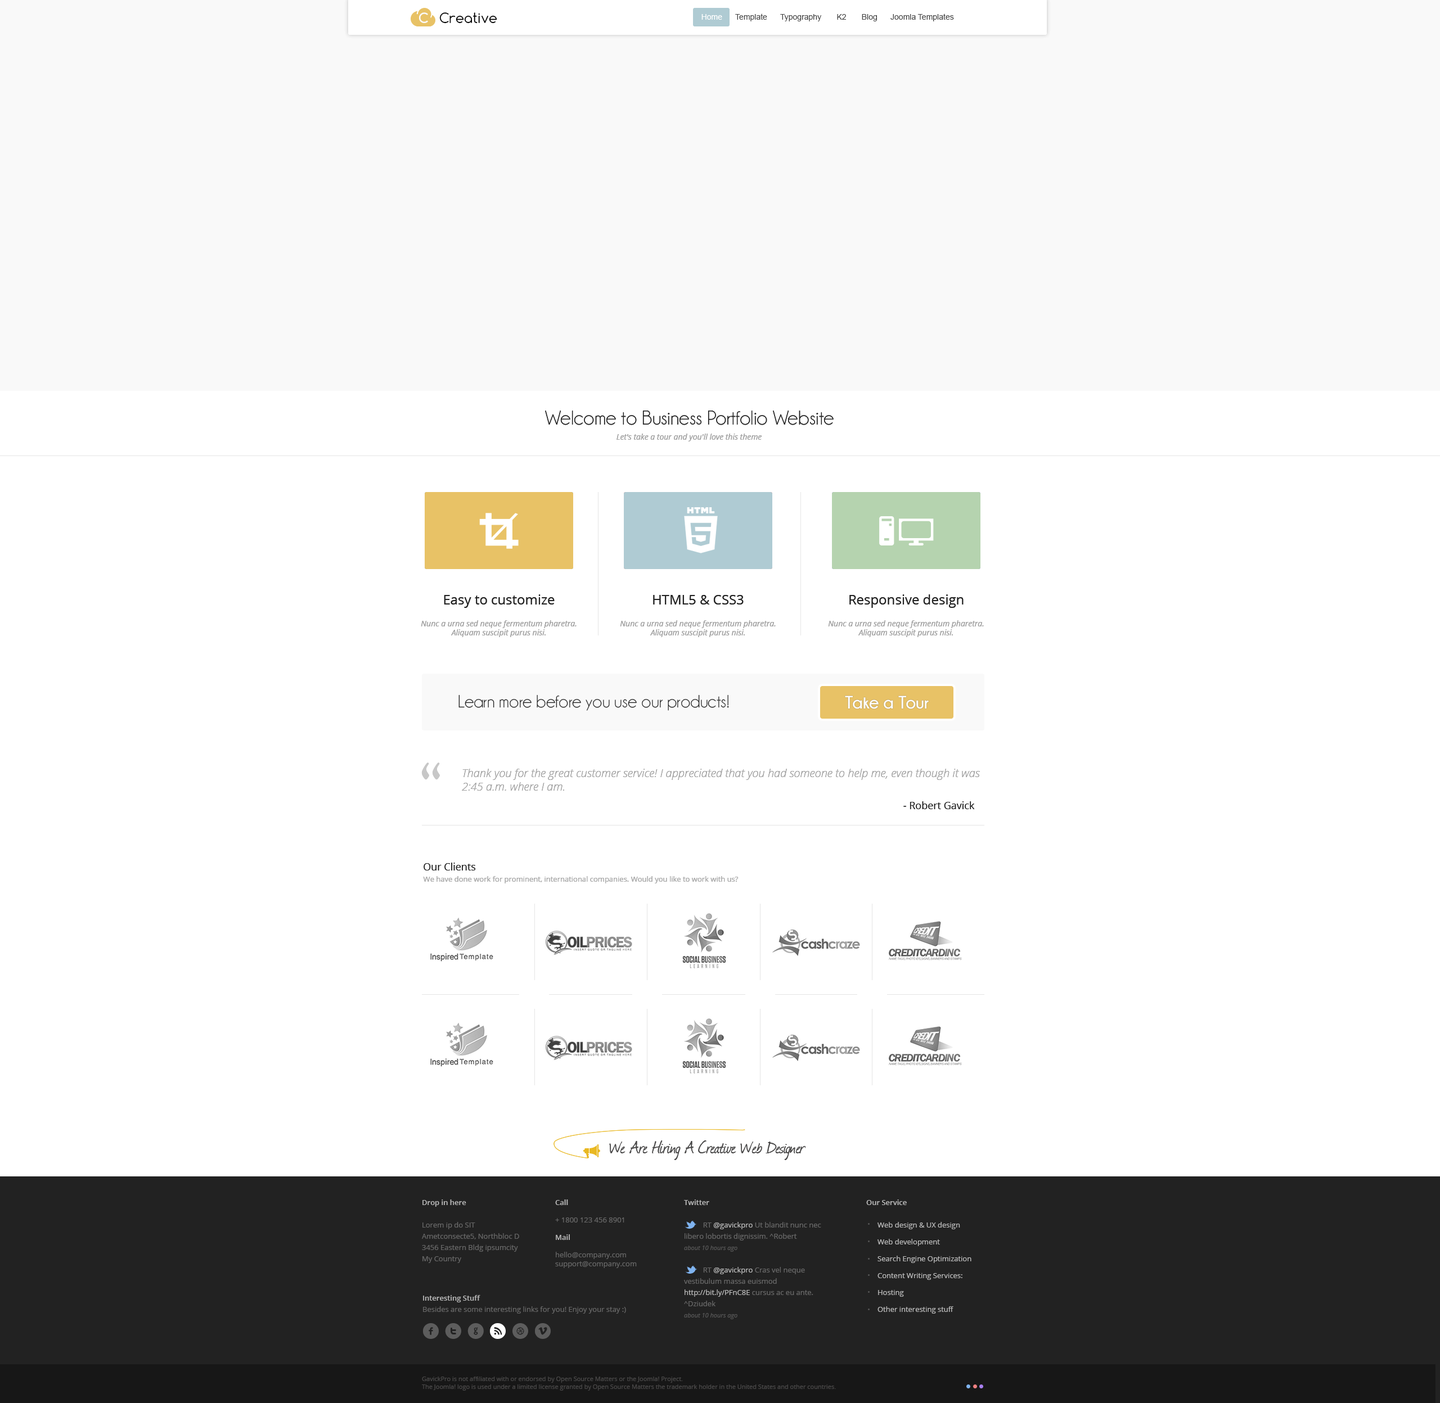
<style>
.page{position:relative;width:1440px;height:1403px;background:#ffffff}
.page>*{position:absolute;margin:0}
.t1{font:13.5px "Comfortaa-Regular";color:#010101}
.t2{font:13.5px "Comfortaa-Bold";color:#fbfbfb}
.t3{font:7.9px "ArialMT";color:#444444}
.t4{font:7.9px "ArialMT";color:#ffffff}
.t5{font:20.2px "Champagne&Limousines";color:#222222}
.t6{font:7.9px "OpenSans-Italic";color:#a5a5a5}
.t7{font:13.5px "OpenSans";color:#222222}
.t8{font:18px "Champagne&Limousines";color:#222222}
.t9{font:18px "Champagne&Limousines-Bold";color:#ffffff}
.t10{font:67.5px "Prociono-Regular";color:#c7c7c7}
.t11{font:11.2px "OpenSansLight-Italic";color:#a5a5a5}
.t12{font:10.1px "OpenSans";color:#222222}
.t13{font:7.3px "OpenSans";color:#aeaeae}
.t14{font:20.2px "Journal";color:#4a4949}
.t15{font:7.3px/11.2px "OpenSans";color:#676767}
.t16{font:7.3px/11.2px "OpenSans-Semibold";color:#b8b8b8}
.t17{font:7.3px "OpenSans";color:#676767}
.t18{font:7.3px "OpenSans-Semibold";color:#b8b8b8}
.t19{font:7.3px/11.2px "OpenSans";color:#b8b8b8}
.t20{font:6.2px/11.2px "OpenSans-Italic";color:#565656}
.t21{font:7.3px/16.9px "OpenSans";color:#b8b8b8}
.t22{font:22.5px "Socialico";letter-spacing:0.2em;color:#5d5d5d}
.t23{font:22.5px "Socialico";letter-spacing:0.2em;color:#ffffff}
.t24{font:6.2px/7.9px "OpenSans";color:#4a4949}
</style>
<div class="page">
<p class="t1" style="left:419px;top:12px;width:78px;height:12px"><span class="t2">C   </span>Creative</p>
<p class="t1" style="left:419px;top:12px;width:78px;height:12px"><span class="t2">C   </span>Creative</p>
<p class="t3" style="left:701px;top:14px;width:253px;height:7px"><span class="t4">Home </span>     Template      Typography       K2       Blog      Joomla Templates</p>
<p class="t3" style="left:701px;top:14px;width:253px;height:7px"><span class="t4">Home </span>     Template      Typography       K2       Blog      Joomla Templates</p>
<p class="t5" style="left:545px;top:411px;width:289px;height:14px">Welcome to Business Portfolio Website</p>
<p class="t5" style="left:545px;top:411px;width:289px;height:14px">Welcome to Business Portfolio Website</p>
<p class="t6" style="left:616px;top:434px;width:146px;height:8px">Let's take a tour and you'll love this theme</p>
<p class="t6" style="left:616px;top:434px;width:146px;height:8px">Let's take a tour and you'll love this theme</p>
<p class="t7" style="left:444px;top:595px;width:111px;height:13px">Easy to customize</p>
<p class="t7" style="left:444px;top:595px;width:111px;height:13px">Easy to customize</p>
<p class="t7" style="left:653px;top:595px;width:91px;height:10px">HTML5 &amp; CSS3</p>
<p class="t7" style="left:653px;top:595px;width:91px;height:10px">HTML5 &amp; CSS3</p>
<p class="t7" style="left:849px;top:595px;width:115px;height:13px">Responsive design</p>
<p class="t7" style="left:849px;top:595px;width:115px;height:13px">Responsive design</p>
<p class="t6" style="left:421px;top:620px;width:156px;height:17px;text-align:center">Nunc a urna sed neque fermentum pharetra. Aliquam suscipit purus nisi.</p>
<p class="t6" style="left:421px;top:620px;width:156px;height:17px;text-align:center">Nunc a urna sed neque fermentum pharetra. Aliquam suscipit purus nisi.</p>
<p class="t6" style="left:620px;top:620px;width:156px;height:17px;text-align:center">Nunc a urna sed neque fermentum pharetra. Aliquam suscipit purus nisi.</p>
<p class="t6" style="left:620px;top:620px;width:156px;height:17px;text-align:center">Nunc a urna sed neque fermentum pharetra. Aliquam suscipit purus nisi.</p>
<p class="t6" style="left:828px;top:620px;width:156px;height:17px;text-align:center">Nunc a urna sed neque fermentum pharetra. Aliquam suscipit purus nisi.</p>
<p class="t6" style="left:828px;top:620px;width:156px;height:17px;text-align:center">Nunc a urna sed neque fermentum pharetra. Aliquam suscipit purus nisi.</p>
<p class="t8" style="left:458px;top:695px;width:271px;height:16px">Learn more before you use our products!</p>
<p class="t8" style="left:458px;top:695px;width:271px;height:16px">Learn more before you use our products!</p>
<p class="t9" style="left:845px;top:696px;width:84px;height:13px">Take a Tour</p>
<p class="t9" style="left:845px;top:696px;width:84px;height:13px">Take a Tour</p>
<p class="t10" style="left:421px;top:763px;width:19px;height:17px">“</p>
<p class="t10" style="left:421px;top:763px;width:19px;height:17px">“</p>
<p class="t11" style="left:462px;top:769px;width:518px;height:22px">Thank you for the great customer service! I appreciated that you had someone to help me, even though it was 2:45 a.m. where I am.</p>
<p class="t11" style="left:462px;top:769px;width:518px;height:22px">Thank you for the great customer service! I appreciated that you had someone to help me, even though it was 2:45 a.m. where I am.</p>
<p class="t12" style="left:903px;top:802px;width:72px;height:7px">- Robert Gavick</p>
<p class="t12" style="left:903px;top:802px;width:72px;height:7px">- Robert Gavick</p>
<p class="t12" style="left:424px;top:863px;width:52px;height:8px">Our Clients</p>
<p class="t12" style="left:424px;top:863px;width:52px;height:8px">Our Clients</p>
<p class="t13" style="left:423px;top:876px;width:316px;height:8px">We have done work for prominent, international companies. Would you like to work with us?</p>
<p class="t13" style="left:423px;top:876px;width:316px;height:8px">We have done work for prominent, international companies. Would you like to work with us?</p>
<p class="t14" style="left:609px;top:1141px;width:197px;height:19px">We Are Hiring A Creative Web Designer</p>
<p class="t14" style="left:609px;top:1141px;width:197px;height:19px">We Are Hiring A Creative Web Designer</p>
<p class="t15" style="left:422px;top:1200px;width:97px;height:63px"><span class="t16">Drop in here<br></span><br>Lorem ip do SIT<br>Ametconsecte5, Northbloc D<br>3456 Eastern Bldg ipsumcity<br>My Country</p>
<p class="t15" style="left:422px;top:1200px;width:97px;height:63px"><span class="t16">Drop in here<br></span><br>Lorem ip do SIT<br>Ametconsecte5, Northbloc D<br>3456 Eastern Bldg ipsumcity<br>My Country</p>
<p class="t17" style="left:555px;top:1200px;width:82px;height:68px"><span class="t18">Call<br></span><br>+ 1800 123 456 8901<br><br><span class="t18">Mail<br></span><br>hello@company.com<br>support@company.com</p>
<p class="t17" style="left:555px;top:1200px;width:82px;height:68px"><span class="t18">Call<br></span><br>+ 1800 123 456 8901<br><br><span class="t18">Mail<br></span><br>hello@company.com<br>support@company.com</p>
<p class="t15" style="left:684px;top:1200px;width:137px;height:120px"><span class="t16">Twitter<br></span><br>          RT <span class="t19">@gavickpro</span> Ut blandit nunc nec libero lobortis dignissim. ^Robert<br><span class="t20">about 10 hours ago<br><br></span>          RT <span class="t19">@gavickpro</span> Cras vel neque vestibulum massa euismod <span class="t19">http://bit.ly/PFnC8E</span> cursus ac eu ante. ^Dziudek<br><span class="t20">about 10 hours ago</span></p>
<p class="t15" style="left:684px;top:1200px;width:137px;height:120px"><span class="t16">Twitter<br></span><br>          RT <span class="t19">@gavickpro</span> Ut blandit nunc nec libero lobortis dignissim. ^Robert<br><span class="t20">about 10 hours ago<br><br></span>          RT <span class="t19">@gavickpro</span> Cras vel neque vestibulum massa euismod <span class="t19">http://bit.ly/PFnC8E</span> cursus ac eu ante. ^Dziudek<br><span class="t20">about 10 hours ago</span></p>
<p class="t18" style="left:866px;top:1200px;width:41px;height:5px"><span class="t17"><br></span>Our Service<br><span class="t17"></span></p>
<p class="t18" style="left:866px;top:1200px;width:41px;height:5px"><span class="t17"><br></span>Our Service<br><span class="t17"></span></p>
<p class="t21" style="left:878px;top:1222px;width:93px;height:92px">Web design &amp; UX design<br>Web development<br>Search Engine Optimization<br>Content Writing Services:<br>Hosting<br>Other interesting stuff</p>
<p class="t21" style="left:878px;top:1222px;width:93px;height:92px">Web design &amp; UX design<br>Web development<br>Search Engine Optimization<br>Content Writing Services:<br>Hosting<br>Other interesting stuff</p>
<p class="t15" style="left:423px;top:1295px;width:203px;height:19px"><span class="t16">Interesting Stuff<br></span>Besides are some interesting links for you! Enjoy your stay :)</p>
<p class="t15" style="left:423px;top:1295px;width:203px;height:19px"><span class="t16">Interesting Stuff<br></span>Besides are some interesting links for you! Enjoy your stay :)</p>
<p class="t22" style="left:423px;top:1324px;width:128px;height:15px">ftg<span class="t23">r</span>dv</p>
<p class="t22" style="left:423px;top:1324px;width:128px;height:15px">ftg<span class="t23">r</span>dv</p>
<p class="t24" style="left:422px;top:1377px;width:414px;height:14px">GavickPro is not affiliated with or endorsed by Open Source Matters or the Joomla! Project.<br>The Joomla! logo is used under a limited license granted by Open Source Matters the trademark holder in the United States and other countries.</p>
<p class="t24" style="left:422px;top:1377px;width:414px;height:14px">GavickPro is not affiliated with or endorsed by Open Source Matters or the Joomla! Project.<br>The Joomla! logo is used under a limited license granted by Open Source Matters the trademark holder in the United States and other countries.</p>
</div>
